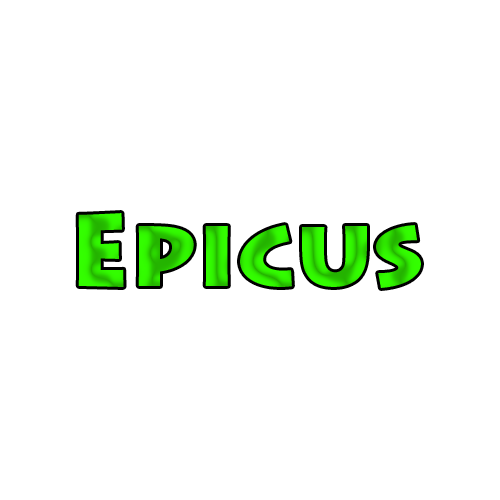
<style>
.page{position:relative;width:500px;height:500px;background:#ffffff}
.page>*{position:absolute;margin:0}
.t1{font:100px "LithosPro-Black"}
</style>
<div class="page">
<p class="t1" style="left:78px;top:213px;width:343px;height:75px">Epicus</p>
</div>
